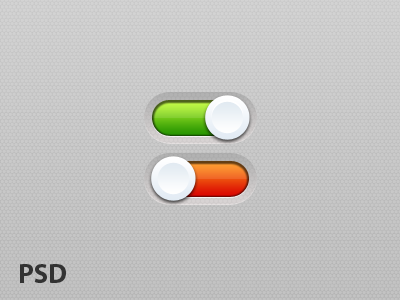
<style>
.page{position:relative;width:400px;height:300px}
.page>*{position:absolute;margin:0}
.t1{font:27px "MyriadPro-Bold";color:#333333}
</style>
<div class="page">
<p class="t1" style="left:20px;top:264px;width:46px;height:19px">PSD</p>
</div>
